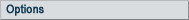
<style>
.page{position:relative;width:189px;height:20px;background:#d9dde0}
.page>*{position:absolute;margin:0}
.t1{font:12px "ArialNarrow";color:#103852;font-weight:bold;scale:1.05 1}
</style>
<div class="page">
<p class="t1" style="left:6px;top:4px;width:38px;height:12px">Options</p>
</div>
